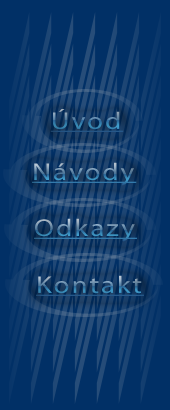
<style>
.page{position:relative;width:170px;height:410px;background:#013066}
.page>*{position:absolute;margin:0}
.t1{font:24.3px "Myriad-Roman";letter-spacing:0.08em;text-decoration:underline;scale:1.19 1}
</style>
<div class="page">
<p class="t1" style="left:50px;top:109px;width:74px;height:23px">Úvod</p>
<p class="t1" style="left:32px;top:162px;width:105px;height:24px">Návody</p>
<p class="t1" style="left:34px;top:218px;width:103px;height:24px">Odkazy</p>
<p class="t1" style="left:36px;top:275px;width:108px;height:21px">Kontakt</p>
</div>
